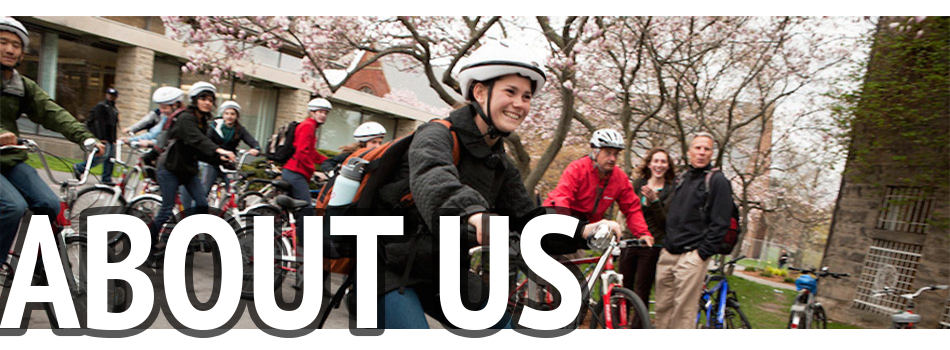
<style>
.page{position:relative;width:950px;height:350px}
.page>*{position:absolute;margin:0}
.t1{font:160px "PTSans-NarrowBold";color:#ffffff}
</style>
<div class="page">
<p class="t1" style="left:0px;top:214px;width:582px;height:116px">ABOUT US</p>
</div>
